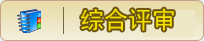
<style>
.page{position:relative;width:204px;height:41px}
.page>*{position:absolute;margin:0}
.t1{font:24px "SimHei";color:#f5e000}
</style>
<div class="page">
<p class="t1" style="left:81px;top:8px;width:93px;height:23px">综合评审</p>
</div>
